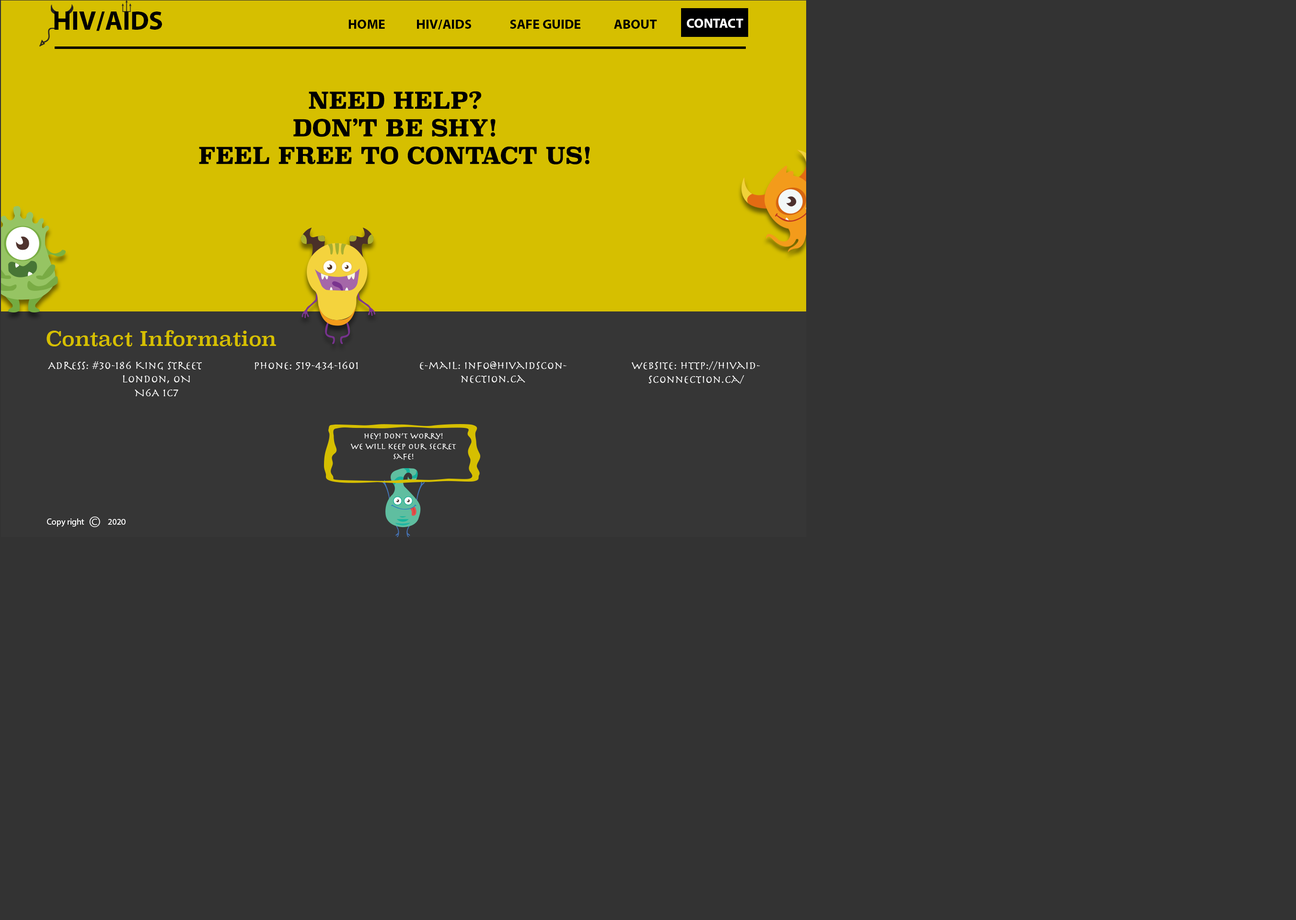
<style>
.page{position:relative;width:1296px;height:920px;background:#333333}
.page>*{position:absolute;margin:0}
.t1{font:26.8px "MyriadPro-Bold";color:#000000}
.t2{font:13.5px "MyriadPro-Bold";color:#000000}
.t3{font:13.5px "MyriadPro-Bold";color:#ffffff}
.t4{font:23px "Superclarendon-Bold";color:#000000}
.t5{font:20.1px "Superclarendon-Regular";color:#d6bf00}
.t6{font:11.5px "Herculanum";color:#ffffff}
.t7{font:8.6px "Herculanum";color:#ffffff}
.t8{font:8.7px "MyriadPro-Regular";color:#ffffff}
</style>
<div class="page">
<p class="t1" style="left:54px;top:12px;width:108px;height:19px">HIV/AIDS</p>
<p class="t2" style="left:348px;top:20px;width:37px;height:9px">HOME</p>
<p class="t2" style="left:417px;top:20px;width:54px;height:10px">HIV/AIDS</p>
<p class="t2" style="left:510px;top:20px;width:70px;height:9px">SAFE GUIDE</p>
<p class="t2" style="left:614px;top:20px;width:43px;height:9px">ABOUT</p>
<p class="t3" style="left:687px;top:19px;width:56px;height:9px">CONTACT</p>
<p class="t4" style="left:199px;top:91px;width:391px;height:73px;text-align:center">NEED HELP?<br>DON’T BE SHY! <br>FEEL FREE TO CONTACT US!</p>
<p class="t5" style="left:46px;top:330px;width:230px;height:16px">Contact Information</p>
<p class="t6" style="left:48px;top:361px;width:154px;height:35px;text-align:right">Adress: #30-186 King Street<br>London, ON<br>N6A 1C7</p>
<p class="t6" style="left:254px;top:362px;width:104px;height:8px">Phone: 519-434-1601</p>
<p class="t6" style="left:420px;top:361px;width:146px;height:22px;text-align:center">E-mail: info@hivaidsconnection.ca</p>
<p class="t6" style="left:632px;top:361px;width:128px;height:23px;text-align:center">Website: http://hivaidsconnection.ca/</p>
<p class="t7" style="left:350px;top:433px;width:106px;height:27px;text-align:center">Hey! Don’t worry! <br>WE will keep our secret safe!</p>
<p class="t8" style="left:47px;top:519px;width:37px;height:8px">Copy right</p>
<p class="t8" style="left:108px;top:519px;width:18px;height:6px">2020</p>
</div>
